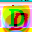
<style>
.page{position:relative;width:32px;height:32px}
.page>*{position:absolute;margin:0}
.t1{font:24px "Bitter-Regular";letter-spacing:-0.01em;font-weight:bold}
</style>
<div class="page">
<p class="t1" style="left:9px;top:7px;width:16px;height:18px">D</p>
</div>
